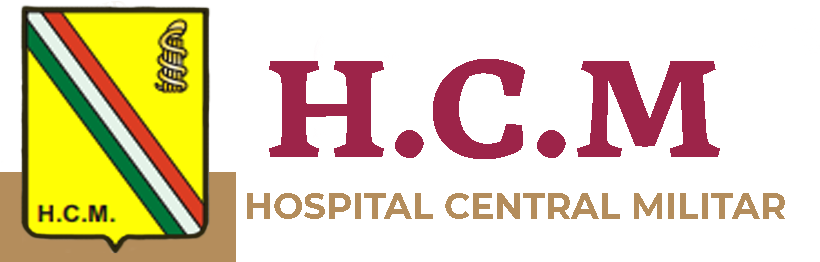
<style>
.page{position:relative;width:820px;height:262px;background:#ffffff}
.page>*{position:absolute;margin:0}
.t1{font:120px "GMX-Bold";color:#9d2449}
.t2{font:36.1px "Montserrat-Bold";color:#b48d5c}
</style>
<div class="page">
<p class="t1" style="left:269px;top:59px;width:451px;height:100px">H.C.M</p>
<p class="t2" style="left:247px;top:193px;width:538px;height:26px">HOSPITAL CENTRAL MILITAR</p>
</div>
